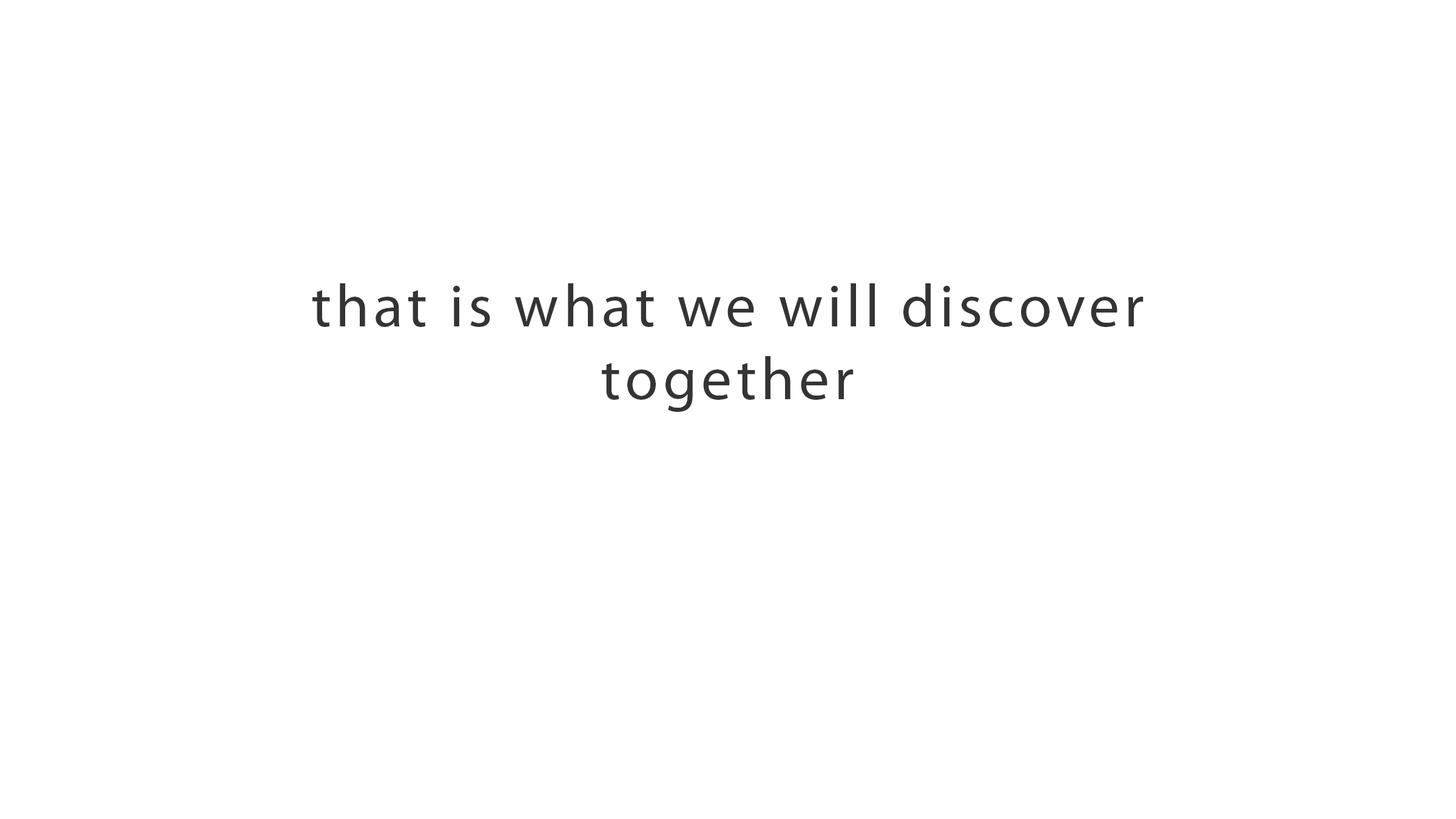
<style>
.page{position:relative;width:1456px;height:819px;background:#ffffff}
.page>*{position:absolute;margin:0}
.t1{font:60.7px "MyriadPro-Regular";letter-spacing:0.075em;color:#343434}
</style>
<div class="page">
<p class="t1" style="left:312px;top:283px;width:832px;height:129px;text-align:center">that is what we will discover<br>together</p>
</div>
